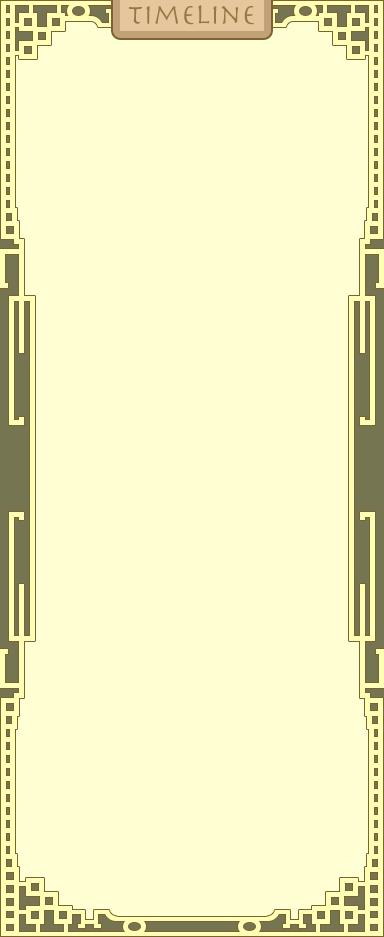
<style>
.page{position:relative;width:384px;height:937px;background:#ffffd3}
.page>*{position:absolute;margin:0}
.t1{font:29.2px "Herculanum";color:#967842}
</style>
<div class="page">
<p class="t1" style="left:128px;top:5px;width:126px;height:20px">Timeline</p>
<p class="t1" style="left:128px;top:5px;width:126px;height:20px">Timeline</p>
</div>
